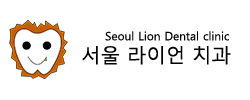
<style>
.page{position:relative;width:250px;height:100px;background:#ffffff}
.page>*{position:absolute;margin:0}
.t1{font:11.7px "MalgunGothic";color:#000000}
.t2{font:19.4px "MalgunGothic";color:#000000}
</style>
<div class="page">
<p class="t1" style="left:105px;top:31px;width:124px;height:10px">Seoul Lion Dental clinic</p>
<p class="t2" style="left:82px;top:46px;width:149px;height:19px">서울 라이언 치과</p>
</div>
